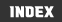
<style>
.page{position:relative;width:62px;height:22px;background:#333333}
.page>*{position:absolute;margin:0}
.t1{font:12.4px "VITRO-CORE-TTF";letter-spacing:0.05em;color:#ffffff;font-weight:bold}
</style>
<div class="page">
<p class="t1" style="left:9px;top:6px;width:45px;height:12px">INDEX</p>
</div>
